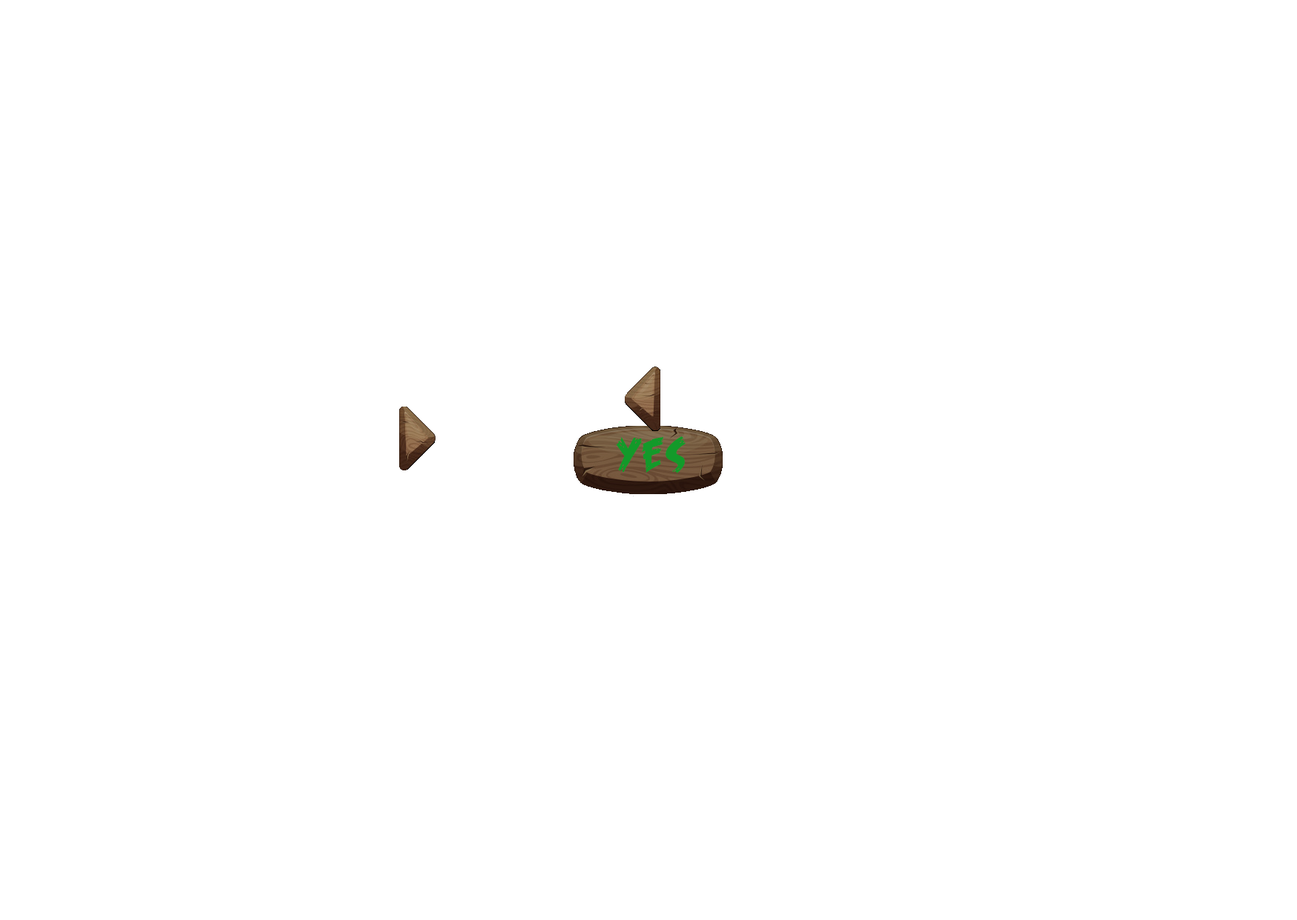
<style>
.page{position:relative;width:1297px;height:920px;background:#ffffff}
.page>*{position:absolute;margin:0}
.t1{font:46.4px "FeastofFleshBB";letter-spacing:0.12em;color:#139a2a;text-transform:uppercase}
</style>
<div class="page">
<p class="t1" style="left:616px;top:436px;width:69px;height:37px">yes</p>
</div>
